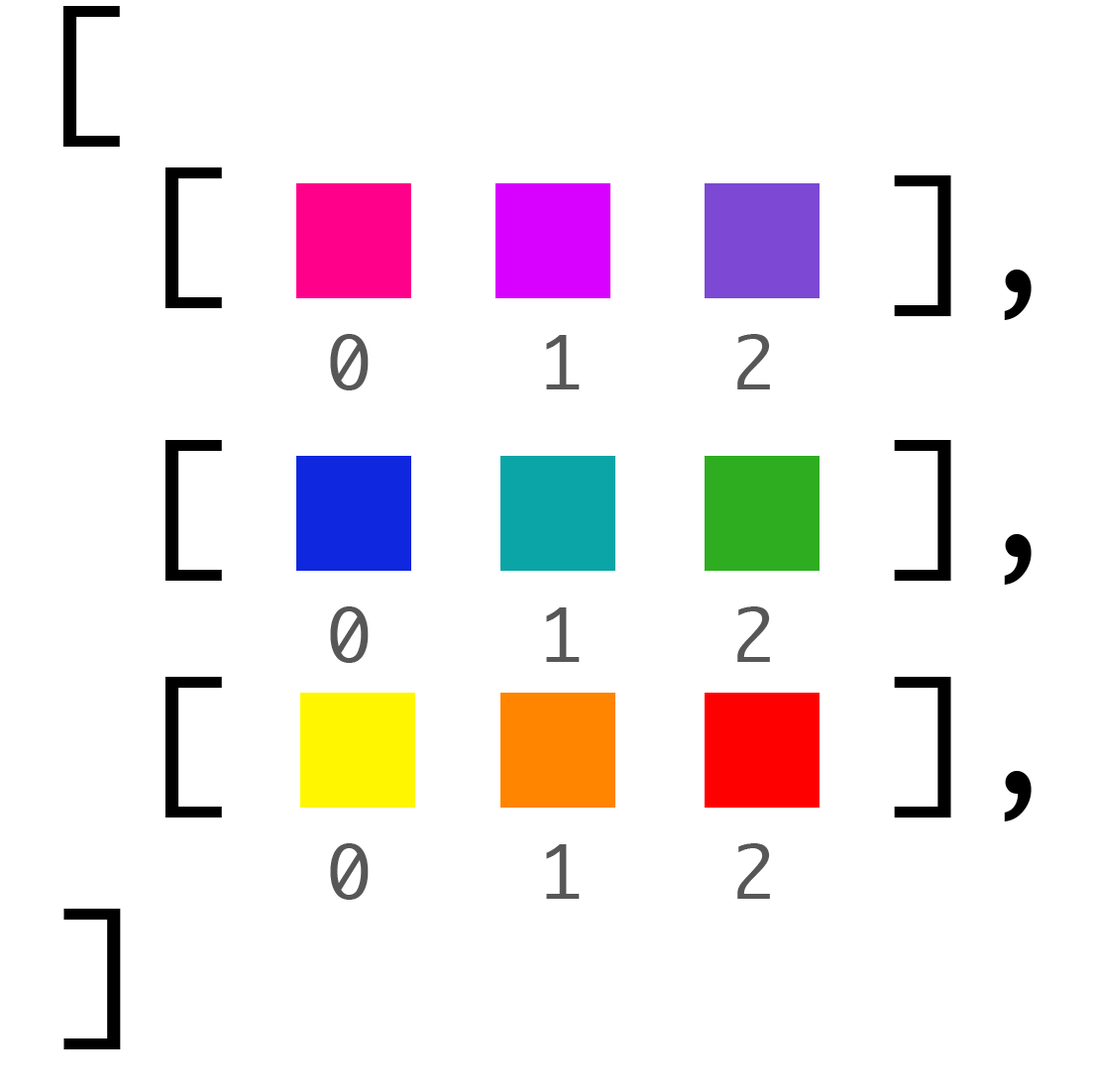
<style>
.page{position:relative;width:1094px;height:1090px;background:#ffffff}
.page>*{position:absolute;margin:0}
.t1{font:142.7px "Monaco";color:#000000}
.t2{font:70.7px "Monaco";color:#575757}
</style>
<div class="page">
<p class="t1" style="left:62px;top:6px;width:58px;height:141px">[</p>
<p class="t1" style="left:164px;top:167px;width:58px;height:141px">[</p>
<p class="t1" style="left:894px;top:175px;width:138px;height:145px">],</p>
<p class="t2" style="left:330px;top:334px;width:39px;height:56px">0</p>
<p class="t2" style="left:546px;top:335px;width:34px;height:54px">1</p>
<p class="t2" style="left:737px;top:334px;width:33px;height:55px">2</p>
<p class="t1" style="left:164px;top:440px;width:58px;height:141px">[</p>
<p class="t1" style="left:894px;top:440px;width:138px;height:145px">],</p>
<p class="t2" style="left:330px;top:606px;width:39px;height:57px">0</p>
<p class="t2" style="left:546px;top:607px;width:34px;height:55px">1</p>
<p class="t2" style="left:737px;top:606px;width:33px;height:56px">2</p>
<p class="t1" style="left:164px;top:677px;width:58px;height:141px">[</p>
<p class="t1" style="left:894px;top:677px;width:138px;height:144px">],</p>
<p class="t2" style="left:330px;top:843px;width:39px;height:57px">0</p>
<p class="t2" style="left:546px;top:844px;width:34px;height:55px">1</p>
<p class="t2" style="left:737px;top:843px;width:33px;height:56px">2</p>
<p class="t1" style="left:63px;top:909px;width:58px;height:140px;rotate:180deg">[</p>
</div>
